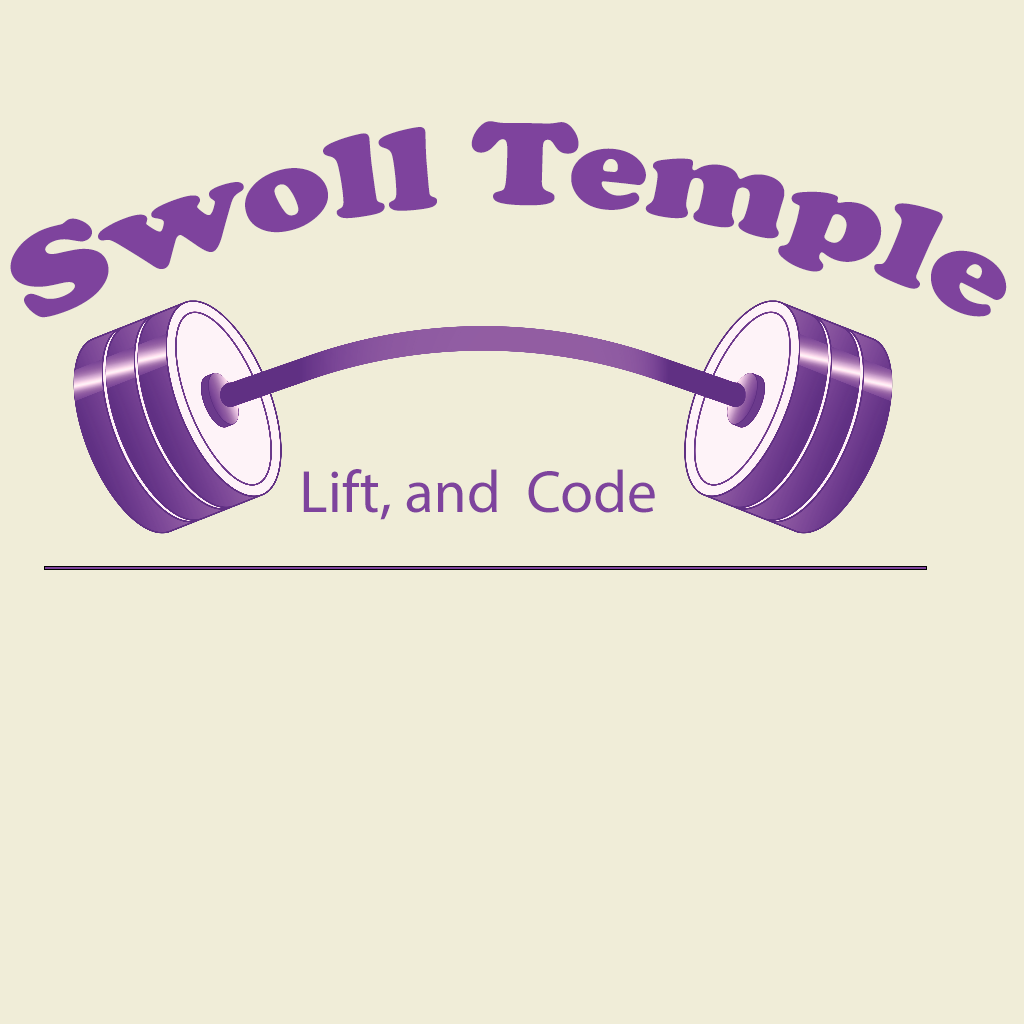
<style>
.page{position:relative;width:1024px;height:1024px;background:#f0edd8}
.page>*{position:absolute;margin:0}
.t1{font:120px "CooperBlack";color:#7e439d}
.t2{font:60px "MyriadPro-Regular";color:#7e439d}
</style>
<div class="page">
<p class="t1" style="left:10px;top:121px;width:997px;height:197px">Swoll Temple</p>
<p class="t2" style="left:303px;top:469px;width:352px;height:51px">Lift, and Code</p>
</div>
